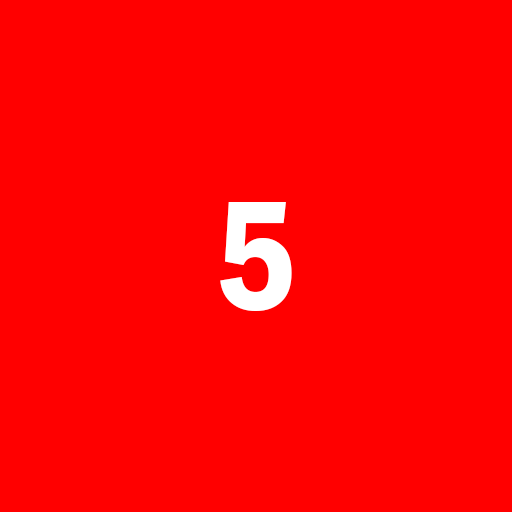
<style>
.page{position:relative;width:512px;height:512px;background:#ff0000}
.page>*{position:absolute;margin:0}
.t1{font:160px "FranklinGothic-DemiCond";color:#ffffff}
</style>
<div class="page">
<p class="t1" style="left:220px;top:202px;width:72px;height:109px">5</p>
</div>
